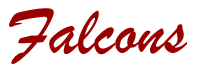
<style>
.page{position:relative;width:200px;height:72px;background:#ffffff}
.page>*{position:absolute;margin:0}
.t1{font:72px "BrushScriptMT";color:#990000}
</style>
<div class="page">
<p class="t1" style="left:9px;top:8px;width:178px;height:56px">Falcons</p>
</div>
